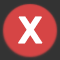
<style>
.page{position:relative;width:60px;height:60px;background:#d64545}
.page>*{position:absolute;margin:0}
.t1{font:36px "CenturyGothic-Bold";color:#ffffff;font-weight:bold}
</style>
<div class="page">
<p class="t1" style="left:18px;top:16px;width:25px;height:28px">X</p>
</div>
